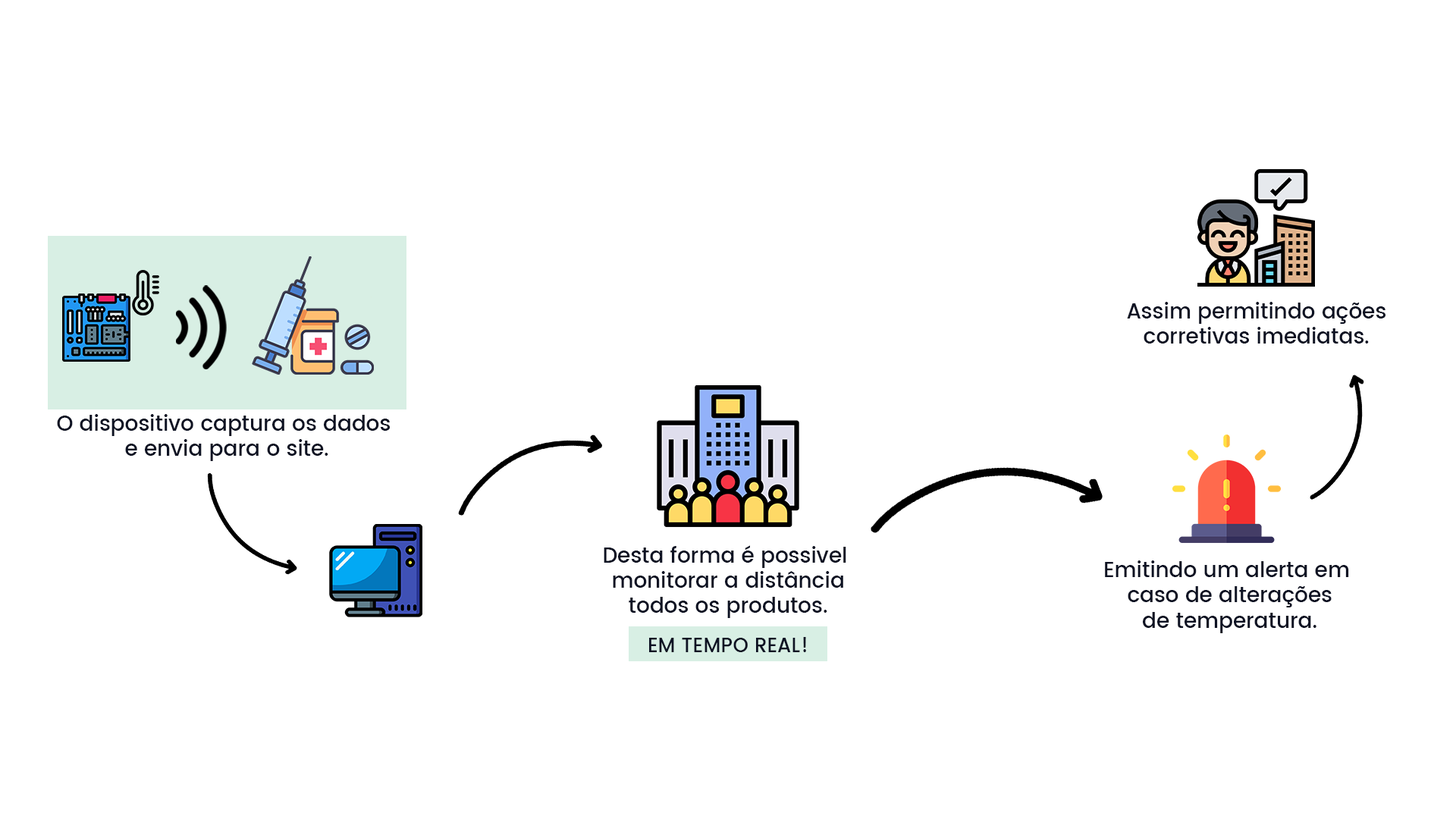
<style>
.page{position:relative;width:1456px;height:819px;background:#ffffff}
.page>*{position:absolute;margin:0}
.t1{font:21.1px "Poppins-Medium";color:#0d1223}
.t2{font:20px "Poppins-Medium";color:#0d1223}
</style>
<div class="page">
<p class="t1" style="left:1127px;top:302px;width:258px;height:42px;text-align:center">Assim permitindo ações<br>corretivas imediatas.</p>
<p class="t1" style="left:57px;top:414px;width:333px;height:47px;text-align:center">O dispositivo captura os dados <br>e envia para o site.</p>
<p class="t1" style="left:604px;top:545px;width:242px;height:73px;text-align:center">Desta forma é possivel <br>monitorar a distância<br>todos os produtos.</p>
<p class="t1" style="left:1105px;top:560px;width:244px;height:73px;text-align:center">Emitindo um alerta em <br>caso de alterações<br>de temperatura.</p>
<p class="t2" style="left:649px;top:637px;width:157px;height:15px">EM TEMPO REAL!</p>
</div>
